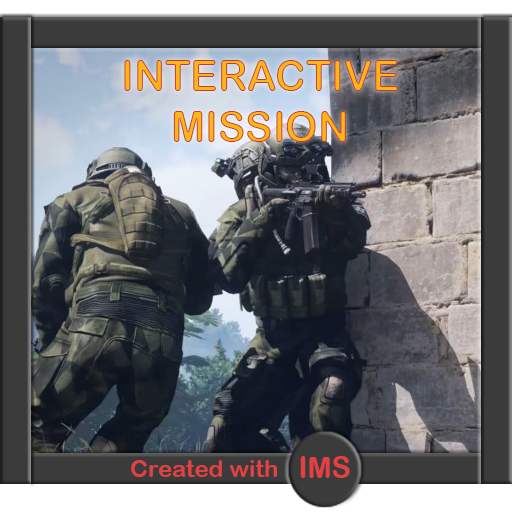
<style>
.page{position:relative;width:512px;height:512px}
.page>*{position:absolute;margin:0}
.t1{font:42.7px "ArialRoundedMTBold";color:#ffb418;scale:0.96 1}
.t2{font:42.7px "Courier";color:#ffb418;scale:0.96 1}
.t3{font:24px "ArialRoundedMTBold";color:#e24142}
.t4{font:29.8px "ArialRoundedMTBold";color:#e24142;scale:0.96 1}
</style>
<div class="page">
<p class="t1" style="left:124px;top:60px;width:274px;height:82px;text-align:center"><span class="t2"><br></span>INTERACTIVE<br>MISSION</p>
<p class="t3" style="left:131px;top:460px;width:146px;height:17px">Created with</p>
<p class="t4" style="left:300px;top:456px;width:50px;height:22px">IMS</p>
</div>
